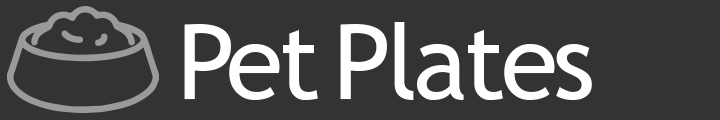
<style>
.page{position:relative;width:720px;height:120px;background:#333333}
.page>*{position:absolute;margin:0}
.t1{font:104px "TrebuchetMS";letter-spacing:-0.04em;color:#ffffff}
</style>
<div class="page">
<p class="t1" style="left:184px;top:24px;width:134px;height:76px">Pet</p>
<p class="t1" style="left:340px;top:22px;width:252px;height:78px">Plates</p>
</div>
